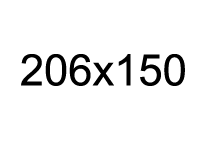
<style>
.page{position:relative;width:206px;height:150px;background:#ffffff}
.page>*{position:absolute;margin:0}
.t1{font:43.5px "ArialMT";color:#000000}
</style>
<div class="page">
<p class="t1" style="left:21px;top:54px;width:164px;height:32px">206x150</p>
</div>
